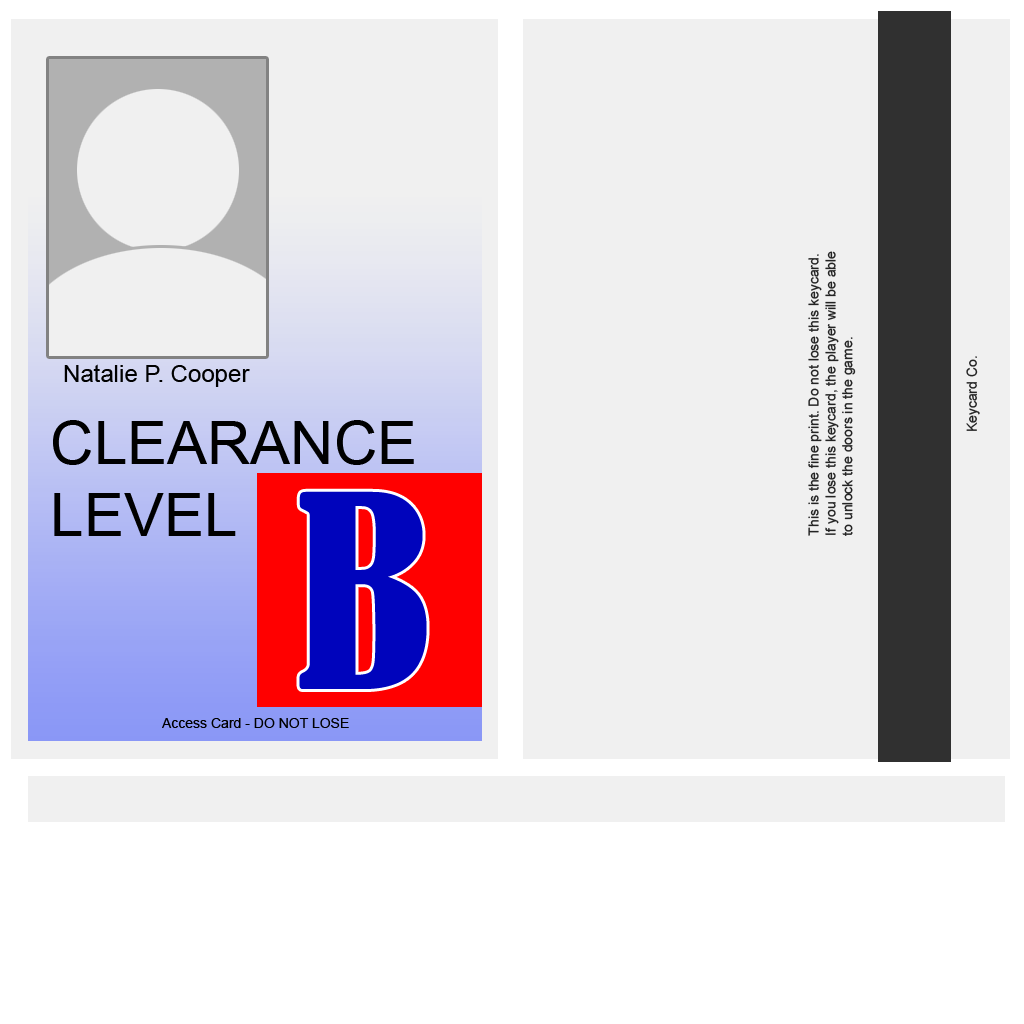
<style>
.page{position:relative;width:1024px;height:1024px;background:#f0f0f0}
.page>*{position:absolute;margin:0}
.t1{font:14px "ArialMT";color:#232323}
.t2{font:24px "ArialMT";color:#000000}
.t3{font:60px "ArialMT";color:#000000}
.t4{font:250px "BernardMT-Condensed";color:#0004bc}
.t5{font:14px "ArialMT";color:#000000}
</style>
<div class="page">
<p class="t1" style="left:808px;top:251px;width:48px;height:285px;rotate:-90deg">This is the fine print. Do not lose this keycard.<br>If you lose this keycard, the player will be able<br>to unlock the doors in the game.</p>
<p class="t2" style="left:64px;top:364px;width:186px;height:23px">Natalie P. Cooper</p>
<p class="t1" style="left:966px;top:356px;width:14px;height:75px;rotate:-90deg">Keycard Co.</p>
<p class="t3" style="left:53px;top:420px;width:361px;height:116px">CLEARANCE<br>LEVEL</p>
<p class="t4" style="left:299px;top:491px;width:128px;height:198px">B</p>
<p class="t5" style="left:162px;top:718px;width:187px;height:10px">Access Card - DO NOT LOSE</p>
</div>
